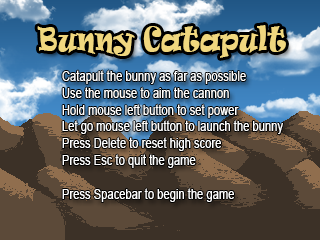
<style>
.page{position:relative;width:320px;height:240px}
.page>*{position:absolute;margin:0}
.t1{font:30px "Ravie";color:#f0d77f;scale:0.8 1}
.t2{font:14px "ArialMT";color:#ffffff;scale:0.8 1}
</style>
<div class="page">
<p class="t1" style="left:37px;top:25px;width:249px;height:33px">Bunny Catapult</p>
<p class="t2" style="left:62px;top:70px;width:221px;height:132px">Catapult the bunny as far as possible<br>Use the mouse to aim the cannon<br>Hold mouse left button to set power<br>Let go mouse left button to launch the bunny<br>Press Delete to reset high score<br>Press Esc to quit the game<br><br>Press Spacebar to begin the game</p>
</div>
